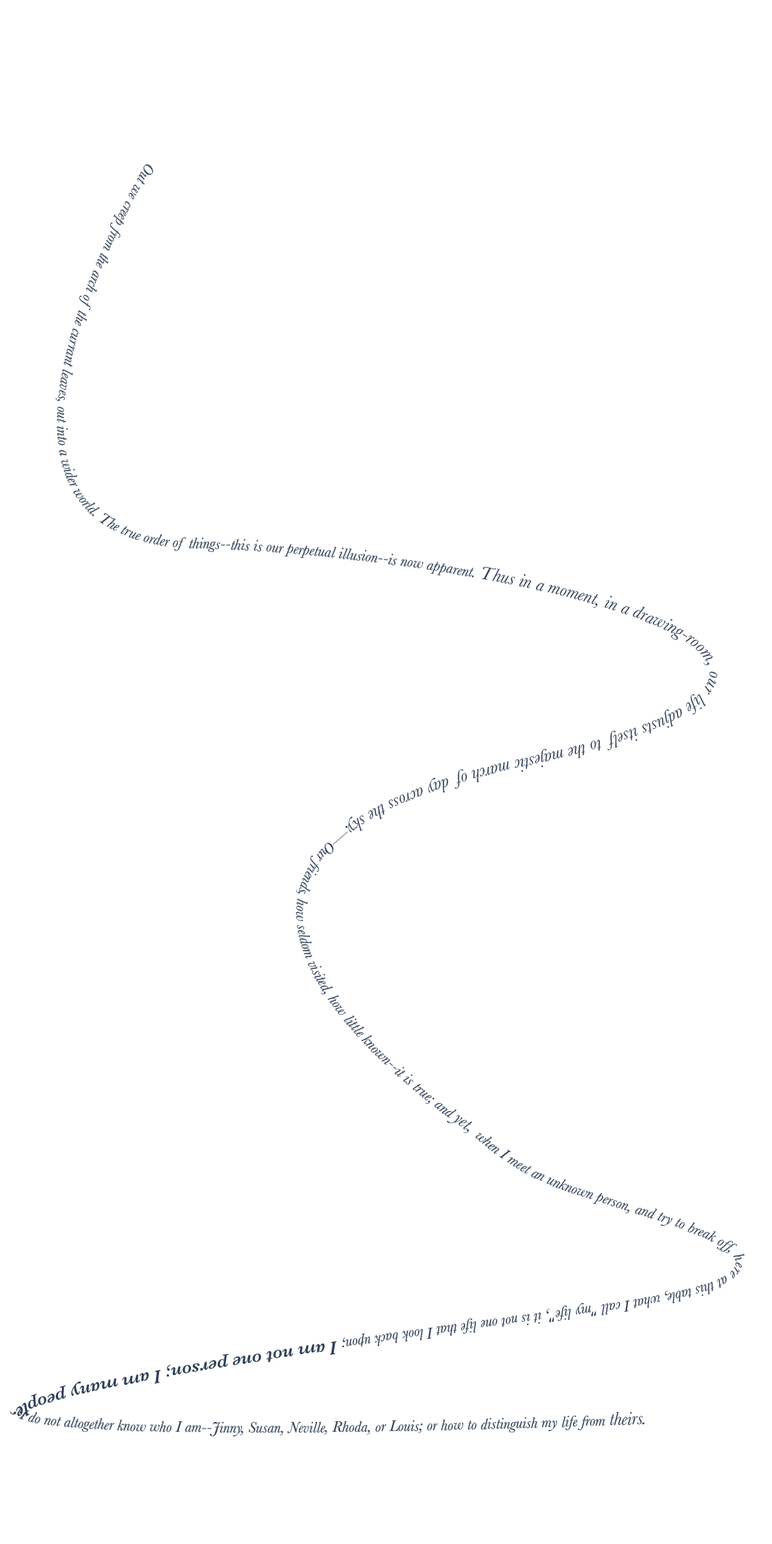
<style>
.page{position:relative;width:772px;height:1544px;background:#ffffff}
.page>*{position:absolute;margin:0}
.t1{font:18.9px "Baskerville-Italic";color:#2e4057}
.t2{font:15.7px "Baskerville-Italic";color:#2e4057}
.t3{font:18.9px "Baskerville-SemiBoldItalic";color:#2e4057}
</style>
<div class="page">
<p class="t1" style="left:55px;top:164px;width:663px;height:969px;text-align:center"><span class="t2">Out we creep from the arch of the currant leaves, out into a wider world. The true order of things--this is our perpetual illusion--is now apparent. </span>Thus in a moment, in a drawing-room, our life adjusts itself to the majestic march of day across the sky.—<span class="t2">Our friends, how seldom visited, how little known--it is true; and </span>yet, when I meet an unknown person, and try to break off, here at this table, what I call "my life", it is not one life that I look back upon; I am not one person; I am many people; I do not altogether know who I am--Jinny, Susan, Neville, Rhoda, or Louis; or how to distinguish my life from theirs.</p>
<p class="t2" style="left:10px;top:1133px;width:735px;height:304px;text-align:center">when I meet an unknown person, and try to break off, here at this table, what I call "my life", it is not one life that I look back upon; <span class="t3">I am not one person; I am many people;</span> I do not altogether know who I am--Jinny, Susan, Neville, Rhoda, or Louis; or how to distinguish my life from <span class="t1">theirs.</span></p>
</div>
